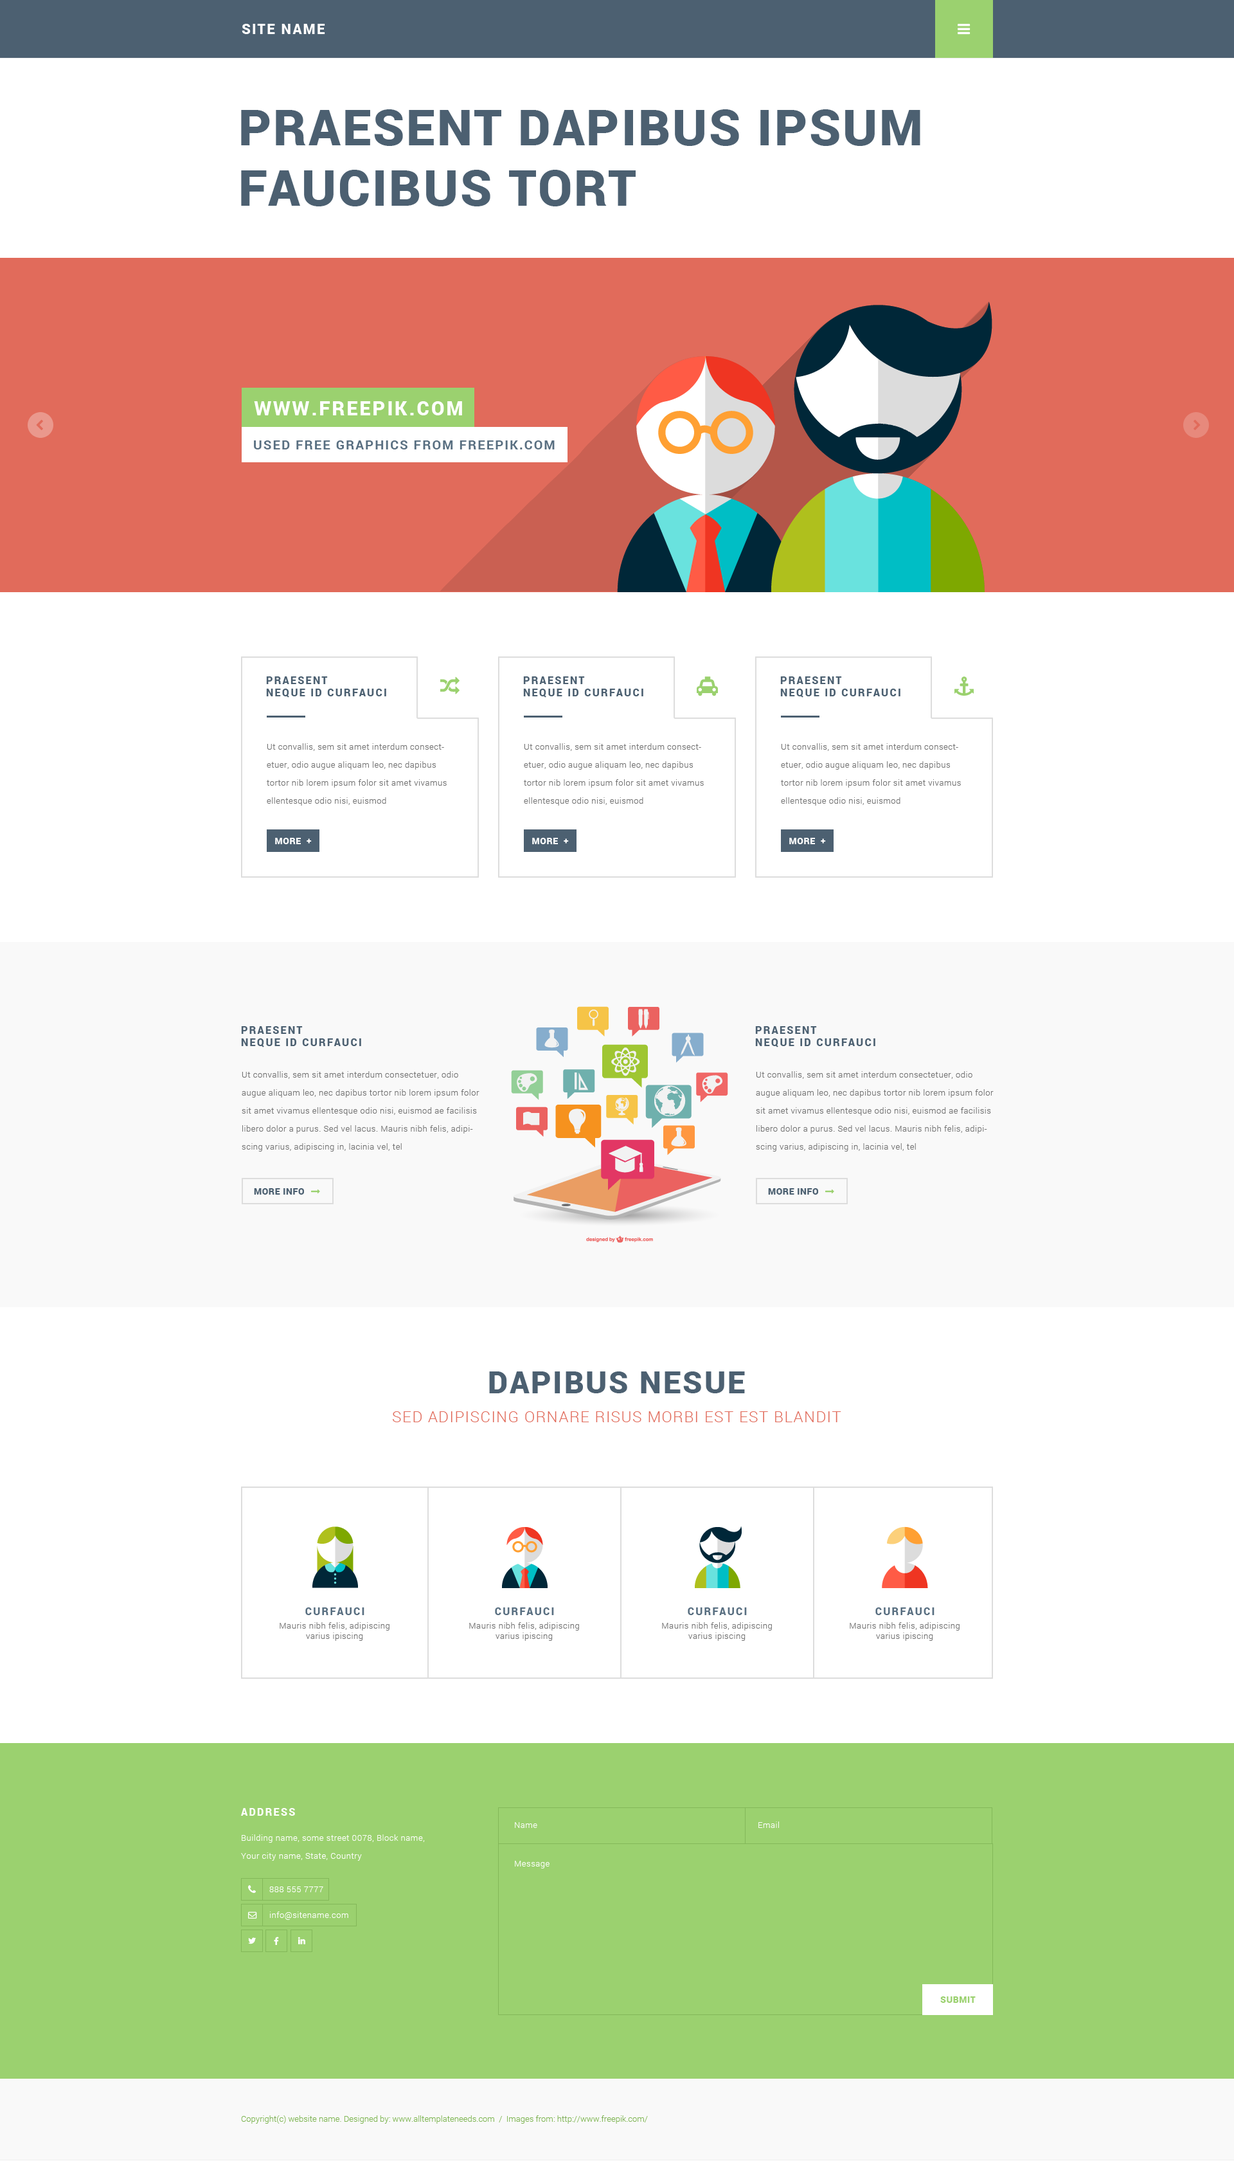
<style>
.page{position:relative;width:1234px;height:2161px;background:#ffffff}
.page>*{position:absolute;margin:0}
.t1{font:14.1px "Roboto-Black";letter-spacing:0.1em;color:#ffffff;text-transform:uppercase}
.t2{font:50.1px "Roboto-Black";letter-spacing:0.04em;color:#4c6071;text-transform:uppercase}
.t3{font:19.3px "Roboto-Black";letter-spacing:0.1em;color:#ffffff;text-transform:uppercase}
.t4{font:12.9px "Roboto-Bold";letter-spacing:0.1em;color:#596f81;text-transform:uppercase}
.t5{font:10.3px "Roboto-Black";letter-spacing:0.14em;color:#4c6071;text-transform:uppercase}
.t6{font:8.4px/18px "Roboto-Light";letter-spacing:0.04em;color:#747474}
.t7{font:9px "Roboto-Black";letter-spacing:0.04em;color:#ffffff;text-transform:uppercase}
.t8{font:9px "Roboto-Black";color:#ffffff;text-transform:uppercase}
.t9{font:9px "Roboto-Black";letter-spacing:0.04em;color:#4c6071;text-transform:uppercase}
.t10{font:30.9px "Roboto-Black";letter-spacing:0.06em;color:#4c6071;text-transform:uppercase}
.t11{font:15.4px "Roboto-Light";letter-spacing:0.06em;color:#e16b5b;text-transform:uppercase}
.t12{font:10.3px "Roboto-Black";letter-spacing:0.14em;color:#596f81;text-transform:uppercase}
.t13{font:8.4px "Roboto-Light";letter-spacing:0.04em;color:#747474}
.t14{font:10.3px "Roboto-Black";letter-spacing:0.14em;color:#ffffff;text-transform:uppercase}
.t15{font:8.4px "Roboto-Light";letter-spacing:0.04em;color:#ffffff}
.t16{font:8.4px/18px "Roboto-Light";letter-spacing:0.04em;color:#ffffff}
.t17{font:9px "Roboto-Black";letter-spacing:0.04em;color:#9bd16f;text-transform:uppercase}
.t18{font:8.4px "Roboto-Light";color:#83b859}
</style>
<div class="page">
<p class="t1" style="left:242px;top:24px;width:83px;height:10px">site name</p>
<p class="t2" style="left:241px;top:109px;width:680px;height:97px">Praesent dapibus ipsum <br>faucibus tort</p>
<p class="t3" style="left:254px;top:401px;width:208px;height:14px">www.freepik.com</p>
<p class="t4" style="left:254px;top:440px;width:301px;height:9px">used free graphics from freepik.com</p>
<p class="t5" style="left:266px;top:676px;width:120px;height:22px">Praesent <br>neque id curfauci</p>
<p class="t5" style="left:523px;top:676px;width:121px;height:22px">Praesent <br>neque id curfauci</p>
<p class="t5" style="left:780px;top:676px;width:121px;height:22px">Praesent <br>neque id curfauci</p>
<p class="t6" style="left:267px;top:743px;width:180px;height:63px">Ut convallis, sem sit amet interdum consectetuer, odio augue aliquam leo, nec dapibus tortor nib lorem ipsum folor sit amet vivamus ellentesque odio nisi, euismod</p>
<p class="t6" style="left:524px;top:743px;width:180px;height:63px">Ut convallis, sem sit amet interdum consectetuer, odio augue aliquam leo, nec dapibus tortor nib lorem ipsum folor sit amet vivamus ellentesque odio nisi, euismod</p>
<p class="t6" style="left:781px;top:743px;width:180px;height:63px">Ut convallis, sem sit amet interdum consectetuer, odio augue aliquam leo, nec dapibus tortor nib lorem ipsum folor sit amet vivamus ellentesque odio nisi, euismod</p>
<p class="t7" style="left:275px;top:838px;width:37px;height:6px">more  <span class="t8">+</span></p>
<p class="t7" style="left:532px;top:838px;width:37px;height:6px">more  <span class="t8">+</span></p>
<p class="t7" style="left:789px;top:838px;width:37px;height:6px">more  <span class="t8">+</span></p>
<p class="t5" style="left:241px;top:1026px;width:120px;height:21px">Praesent <br>neque id curfauci</p>
<p class="t5" style="left:755px;top:1026px;width:121px;height:21px">Praesent <br>neque id curfauci</p>
<p class="t6" style="left:242px;top:1071px;width:238px;height:80px">Ut convallis, sem sit amet interdum consectetuer, odio augue aliquam leo, nec dapibus tortor nib lorem ipsum folor sit amet vivamus ellentesque odio nisi, euismod ae facilisis libero dolor a purus. Sed vel lacus. Mauris nibh felis, adipiscing varius, adipiscing in, lacinia vel, tel</p>
<p class="t6" style="left:756px;top:1071px;width:238px;height:80px">Ut convallis, sem sit amet interdum consectetuer, odio augue aliquam leo, nec dapibus tortor nib lorem ipsum folor sit amet vivamus ellentesque odio nisi, euismod ae facilisis libero dolor a purus. Sed vel lacus. Mauris nibh felis, adipiscing varius, adipiscing in, lacinia vel, tel</p>
<p class="t9" style="left:254px;top:1188px;width:50px;height:6px">more info</p>
<p class="t9" style="left:768px;top:1188px;width:50px;height:6px">more info</p>
<p class="t10" style="left:489px;top:1371px;width:256px;height:22px">dapibus neSue</p>
<p class="t11" style="left:393px;top:1411px;width:449px;height:11px">Sed adipiscing ornare risus Morbi est est blandit</p>
<p class="t12" style="left:305px;top:1607px;width:59px;height:8px">curfauci</p>
<p class="t12" style="left:495px;top:1607px;width:59px;height:8px">curfauci</p>
<p class="t12" style="left:688px;top:1607px;width:59px;height:8px">curfauci</p>
<p class="t12" style="left:876px;top:1607px;width:59px;height:8px">curfauci</p>
<p class="t13" style="left:280px;top:1622px;width:110px;height:19px;text-align:center">Mauris nibh felis, adipiscing varius ipiscing</p>
<p class="t13" style="left:469px;top:1622px;width:110px;height:19px;text-align:center">Mauris nibh felis, adipiscing varius ipiscing</p>
<p class="t13" style="left:662px;top:1622px;width:110px;height:19px;text-align:center">Mauris nibh felis, adipiscing varius ipiscing</p>
<p class="t13" style="left:850px;top:1622px;width:110px;height:19px;text-align:center">Mauris nibh felis, adipiscing varius ipiscing</p>
<p class="t14" style="left:241px;top:1808px;width:54px;height:7px">Address</p>
<p class="t15" style="left:515px;top:1822px;width:22px;height:6px">Name</p>
<p class="t15" style="left:759px;top:1821px;width:20px;height:7px">Email</p>
<p class="t16" style="left:241px;top:1834px;width:184px;height:26px">Building name, some street 0078, Block name,<br>Your city name, State, Country</p>
<p class="t15" style="left:515px;top:1860px;width:35px;height:8px">Message</p>
<p class="t15" style="left:269px;top:1886px;width:54px;height:6px">888 555 7777</p>
<p class="t15" style="left:270px;top:1911px;width:78px;height:9px">info@sitename.com</p>
<p class="t17" style="left:941px;top:1996px;width:35px;height:7px">submit</p>
<p class="t18" style="left:241px;top:2115px;width:407px;height:8px">Copyright(c) website name. Designed by: www.alltemplateneeds.com  /  Images from: http://www.freepik.com/</p>
</div>
